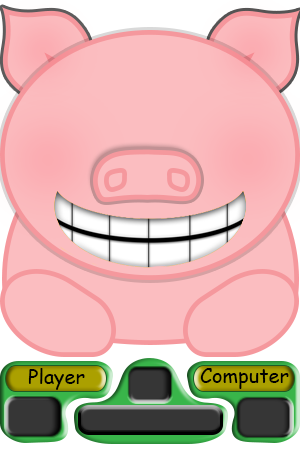
<style>
.page{position:relative;width:300px;height:460px;background:#fbbdc0}
.page>*{position:absolute;margin:0}
.t1{font:20px "ComicSansMS";color:#000000}
</style>
<div class="page">
<p class="t1" style="left:28px;top:368px;width:57px;height:22px">Player</p>
<p class="t1" style="left:200px;top:368px;width:89px;height:21px">Computer</p>
</div>
